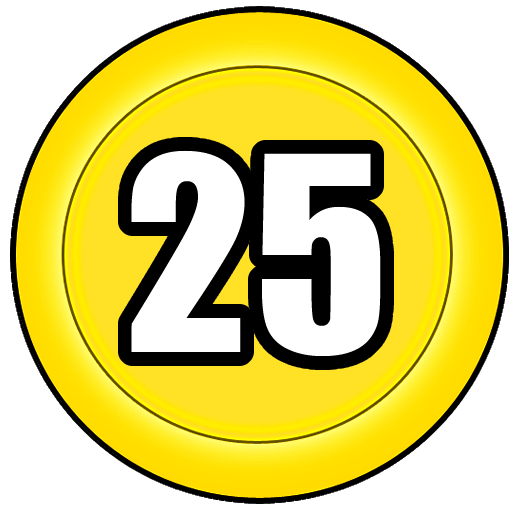
<style>
.page{position:relative;width:512px;height:512px;background:#ffffff}
.page>*{position:absolute;margin:0}
.t1{font:250px "Impact";letter-spacing:0.012em;color:#ffffff}
</style>
<div class="page">
<p class="t1" style="left:131px;top:150px;width:250px;height:206px">25</p>
</div>
